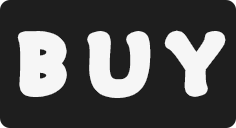
<style>
.page{position:relative;width:236px;height:128px;background:#1e1e1e}
.page>*{position:absolute;margin:0}
.t1{font:75px "MaiandraGD-Regular";letter-spacing:0.22em;color:#f6f6f6;font-weight:bold;scale:1.11 1}
</style>
<div class="page">
<p class="t1" style="left:23px;top:36px;width:197px;height:56px">BUY</p>
</div>
